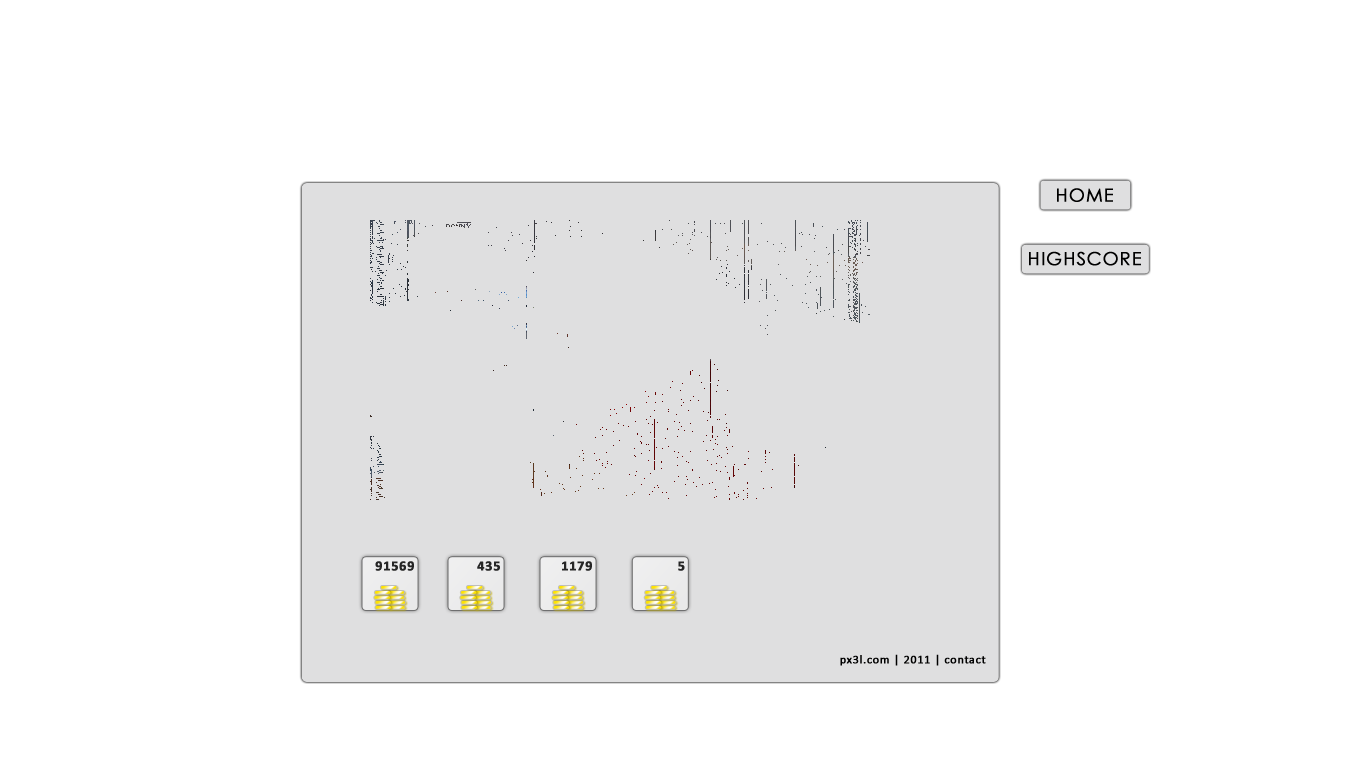
<style>
.page{position:relative;width:1366px;height:768px;background:#ffffff}
.page>*{position:absolute;margin:0}
.t1{font:18px "CenturyGothic";letter-spacing:0.04em;color:#000000;font-weight:bold}
.t2{font:14px "Calibri-Bold";letter-spacing:0.04em;color:#262626;font-weight:bold}
.t3{font:12px "Calibri";letter-spacing:0.04em;color:#000000;font-weight:bold}
</style>
<div class="page">
<p class="t1" style="left:1057px;top:188px;width:56px;height:14px">HOME</p>
<p class="t1" style="left:1029px;top:251px;width:112px;height:15px">HIGHSCORE</p>
<p class="t2" style="left:375px;top:561px;width:39px;height:10px">91569</p>
<p class="t2" style="left:477px;top:561px;width:23px;height:10px">435</p>
<p class="t2" style="left:562px;top:561px;width:30px;height:10px">1179</p>
<p class="t2" style="left:678px;top:561px;width:7px;height:10px">5</p>
<p class="t3" style="left:840px;top:654px;width:146px;height:12px">px3l.com | 2011 | contact</p>
</div>
